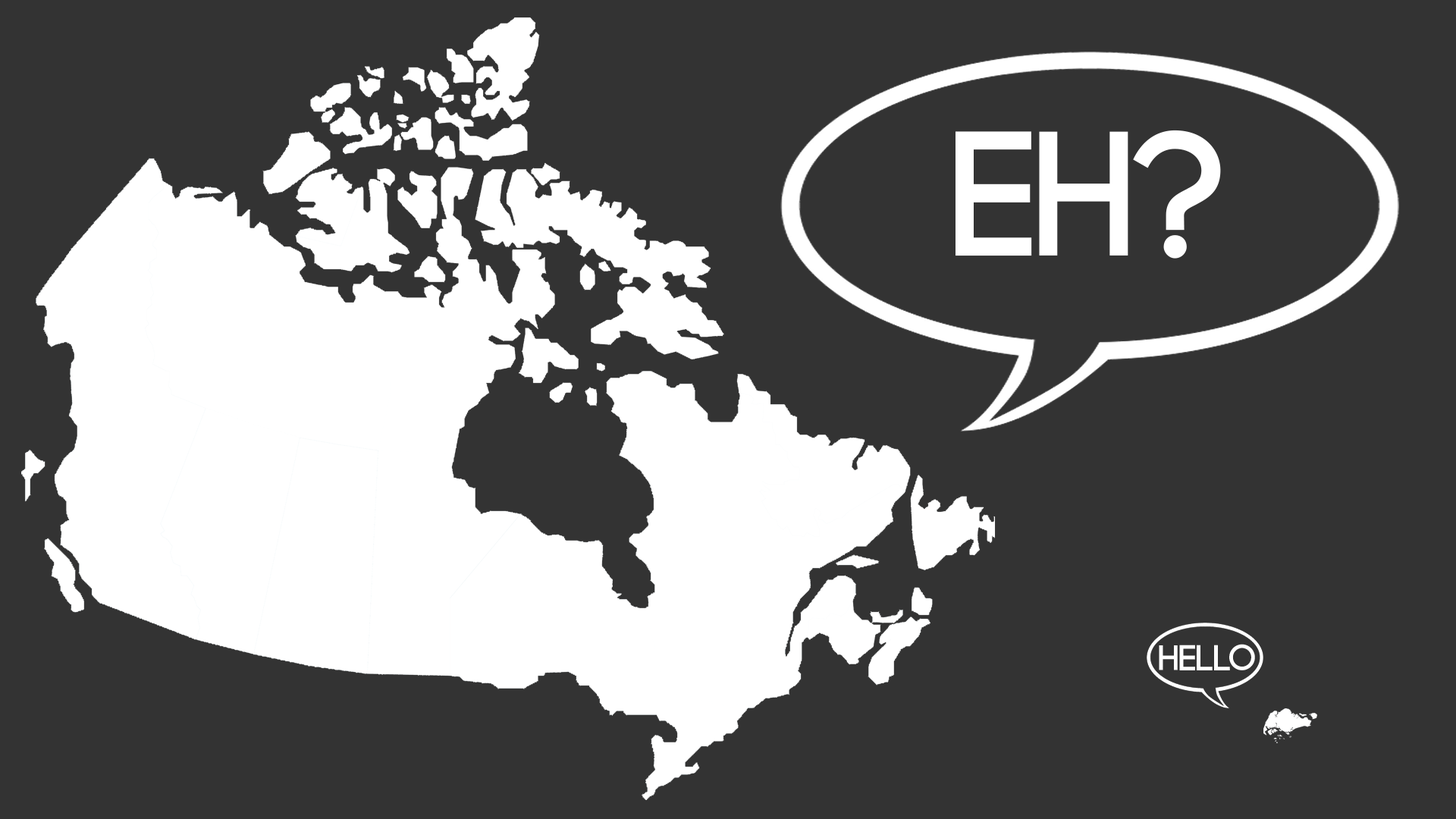
<style>
.page{position:relative;width:1456px;height:819px;background:#333333}
.page>*{position:absolute;margin:0}
.t1{font:177.6px "Code-Bold";color:#ffffff}
.t2{font:36.4px "Code-Bold";color:#ffffff}
</style>
<div class="page">
<p class="t1" style="left:955px;top:130px;width:266px;height:129px">EH?</p>
<p class="t2" style="left:1159px;top:644px;width:96px;height:26px">hello</p>
</div>
